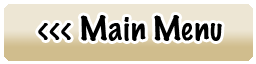
<style>
.page{position:relative;width:256px;height:64px;background:#ede6d4}
.page>*{position:absolute;margin:0}
.t1{font:30px "MarkerFelt-Thin";color:#000000}
</style>
<div class="page">
<p class="t1" style="left:38px;top:15px;width:184px;height:26px">&lt;&lt;&lt; Main Menu</p>
</div>
